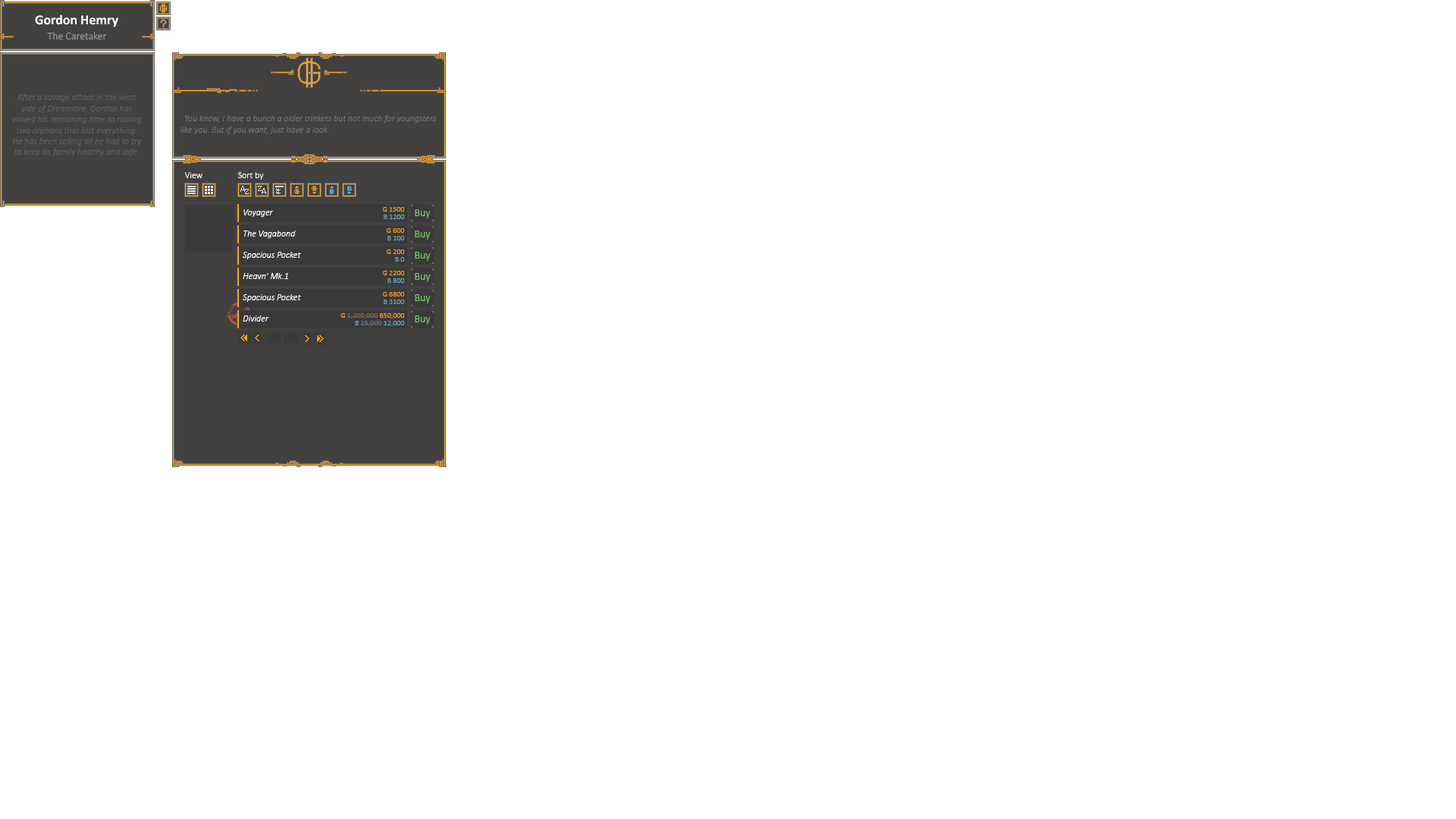
<style>
.page{position:relative;width:1456px;height:819px;background:#ffffff}
.page>*{position:absolute;margin:0}
.t1{font:13.6px "Calibri-Bold";color:#ffffff}
.t2{font:10.6px "Calibri-Light";color:#979797}
.t3{font:9.1px "Calibri-LightItalic";color:#606060}
.t4{font:9.1px "Calibri-LightItalic";color:#727272}
.t5{font:9.1px "Calibri-Light";color:#ffffff}
.t6{font:9.1px "Calibri-LightItalic";color:#ffffff}
.t7{font:7.6px "Calibri-Light";color:#ffa11d}
.t8{font:10.6px "Calibri-Light";color:#7ed36b}
.t9{font:7.6px "Calibri-Light";color:#63b0d4}
.t10{font:7.6px "Calibri-Light";color:#8e6936}
.t11{font:7.6px "Calibri-Light";color:#5d7b89}
</style>
<div class="page">
<p class="t1" style="left:35px;top:14px;width:83px;height:13px">Gordon Hemry</p>
<p class="t2" style="left:47px;top:32px;width:60px;height:8px">The Caretaker</p>
<p class="t3" style="left:12px;top:94px;width:130px;height:62px;text-align:center">After a savage attack in the west side of Dreamlore, Gordon has vowed his remaining time to raising two orphans that lost everything.<br>He has been selling all he had to try to keep its family healthy and safe.</p>
<p class="t4" style="left:180px;top:115px;width:257px;height:19px">You know, I have a bunch a older trinkets but not much for youngsters like you. But if you want, just have a look.</p>
<p class="t5" style="left:184px;top:172px;width:18px;height:6px">View</p>
<p class="t5" style="left:238px;top:172px;width:26px;height:8px">Sort by</p>
<p class="t6" style="left:243px;top:209px;width:30px;height:8px">Voyager</p>
<p class="t7" style="left:382px;top:207px;width:22px;height:5px">G 1500</p>
<p class="t8" style="left:415px;top:209px;width:16px;height:9px">Buy</p>
<p class="t9" style="left:384px;top:215px;width:20px;height:4px">B 1200</p>
<p class="t6" style="left:243px;top:231px;width:53px;height:7px">The Vagabond</p>
<p class="t7" style="left:386px;top:228px;width:18px;height:5px">G 600</p>
<p class="t8" style="left:415px;top:231px;width:16px;height:9px">Buy</p>
<p class="t9" style="left:388px;top:236px;width:16px;height:4px">B 100</p>
<p class="t6" style="left:243px;top:252px;width:58px;height:7px">Spacious Pocket</p>
<p class="t7" style="left:386px;top:249px;width:18px;height:5px">G 200</p>
<p class="t9" style="left:395px;top:257px;width:9px;height:5px">B 0</p>
<p class="t8" style="left:415px;top:252px;width:16px;height:9px">Buy</p>
<p class="t6" style="left:243px;top:273px;width:45px;height:6px">Heavn’ Mk.1</p>
<p class="t7" style="left:382px;top:271px;width:22px;height:4px">G 2200</p>
<p class="t9" style="left:388px;top:278px;width:16px;height:5px">B 800</p>
<p class="t8" style="left:415px;top:273px;width:16px;height:9px">Buy</p>
<p class="t7" style="left:382px;top:292px;width:22px;height:5px">G 6800</p>
<p class="t6" style="left:243px;top:294px;width:58px;height:8px">Spacious Pocket</p>
<p class="t9" style="left:384px;top:300px;width:20px;height:4px">B 3100</p>
<p class="t8" style="left:415px;top:294px;width:16px;height:9px">Buy</p>
<p class="t6" style="left:243px;top:315px;width:26px;height:7px">Divider</p>
<p class="t10" style="left:340px;top:313px;width:64px;height:5px"><span class="t7">G </span>1,200,000<span class="t7"> 650,000</span></p>
<p class="t8" style="left:415px;top:315px;width:16px;height:10px">Buy</p>
<p class="t11" style="left:355px;top:321px;width:49px;height:5px"><span class="t9">B </span>25,000<span class="t9"> 12,000</span></p>
</div>
